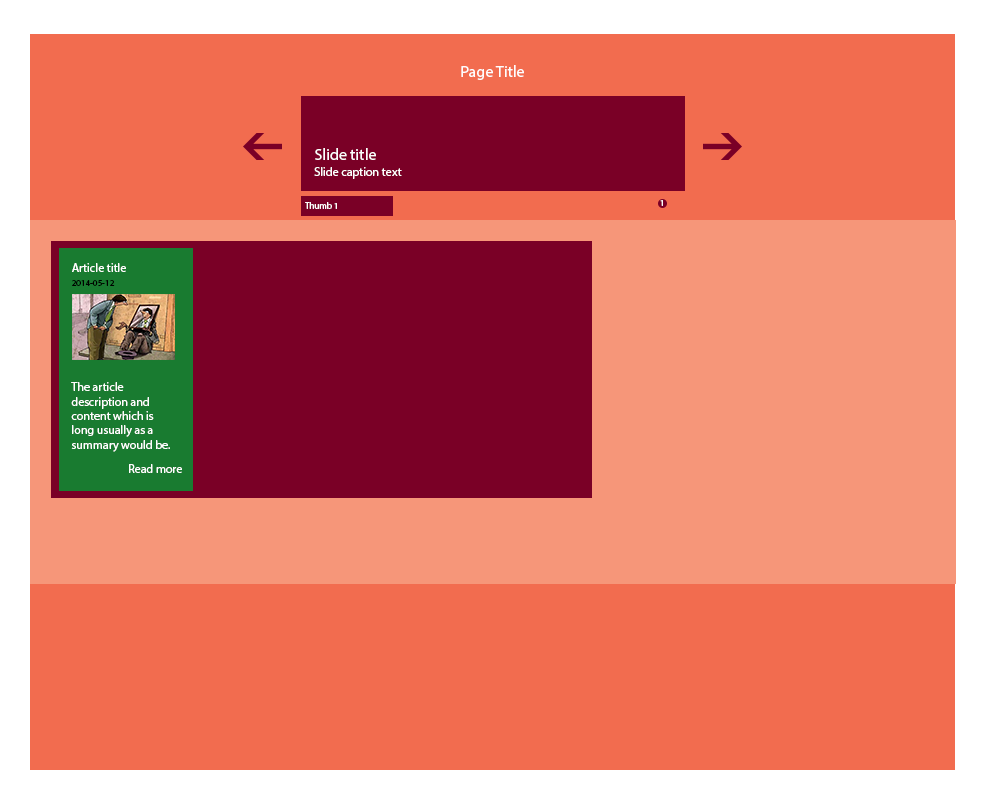
<style>
.page{position:relative;width:1000px;height:800px;background:#f26c4f}
.page>*{position:absolute;margin:0}
.t1{font:16px "MyriadPro-Regular";color:#fefefe}
.t2{font:12px "MyriadPro-Regular";color:#fefefe}
.t3{font:9px "MyriadPro-Regular";color:#fefefe}
.t4{font:9px "MyriadPro-Regular";color:#000000}
</style>
<div class="page">
<p class="t1" style="left:461px;top:65px;width:63px;height:15px">Page Title</p>
<p class="t1" style="left:315px;top:148px;width:61px;height:12px">Slide title</p>
<p class="t2" style="left:314px;top:167px;width:88px;height:12px">Slide caption text</p>
<p class="t3" style="left:305px;top:202px;width:32px;height:7px">Thumb 1</p>
<p class="t3" style="left:660px;top:200px;width:3px;height:6px">1</p>
<p class="t2" style="left:72px;top:263px;width:54px;height:9px">Article title</p>
<p class="t4" style="left:72px;top:280px;width:43px;height:6px">2014-05-12</p>
<p class="t2" style="left:71px;top:382px;width:99px;height:70px">The article description and content which is long usually as a summary would be.</p>
<p class="t2" style="left:129px;top:464px;width:53px;height:9px">Read more</p>
</div>
